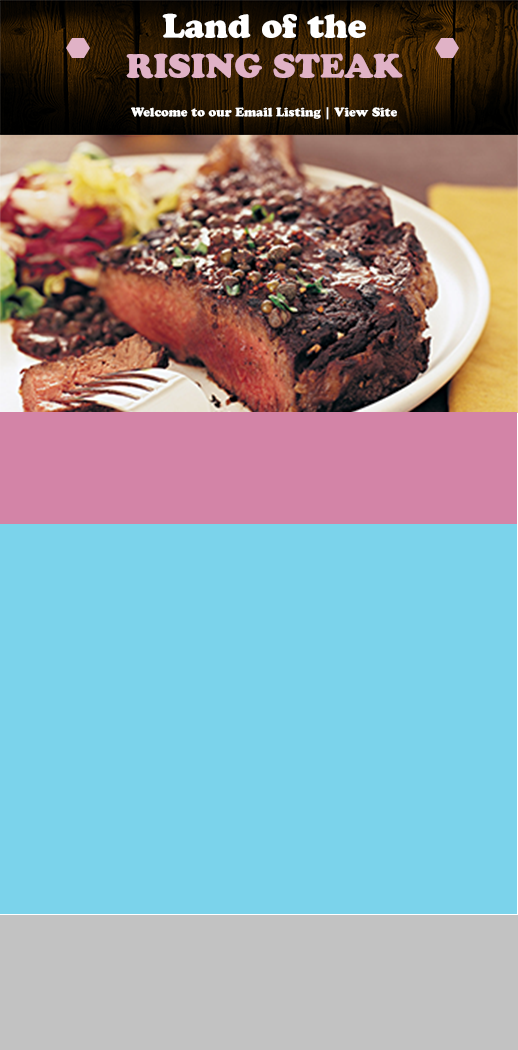
<style>
.page{position:relative;width:518px;height:1050px;background:#7bd3eb}
.page>*{position:absolute;margin:0}
.t1{font:33.3px "CooperBlackStd";color:#e0b2c6}
.t2{font:33.3px "CooperBlackStd";color:#ffffff}
.t3{font:12px "CooperBlackStd";color:#ffffff}
</style>
<div class="page">
<p class="t1" style="left:126px;top:13px;width:277px;height:66px;text-align:center"><span class="t2">Land of the<br></span>RISING STEAK</p>
<p class="t3" style="left:131px;top:107px;width:266px;height:13px">Welcome to our Email Listing | View Site</p>
</div>
